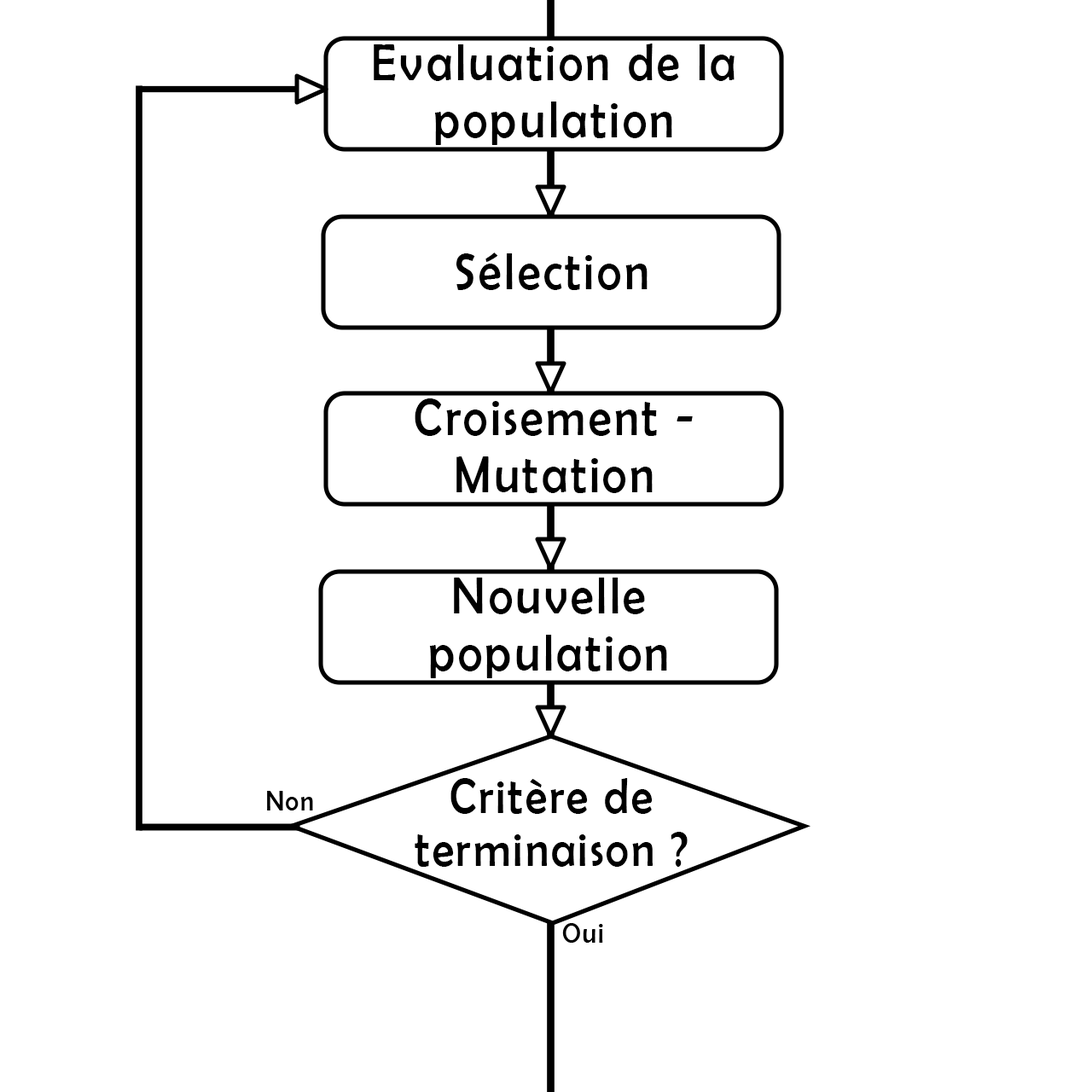
<style>
.page{position:relative;width:1092px;height:1092px;background:#ffffff}
.page>*{position:absolute;margin:0}
.t1{font:52.9px "BerlinSansFB-Reg";letter-spacing:0.06em;color:#000000;scale:0.89 1}
.t2{font:49.6px "BerlinSansFB-Reg";letter-spacing:0.06em;color:#000000;scale:0.89 1}
.t3{font:28.7px "BerlinSansFB-Reg";letter-spacing:0.06em;color:#000000;scale:0.89 1}
</style>
<div class="page">
<p class="t1" style="left:374px;top:44px;width:361px;height:101px;text-align:center">Evaluation de la <br>population</p>
<p class="t1" style="left:456px;top:253px;width:192px;height:37px">Sélection</p>
<p class="t1" style="left:415px;top:398px;width:278px;height:95px;text-align:center">Croisement - Mutation</p>
<p class="t1" style="left:429px;top:578px;width:238px;height:100px;text-align:center">Nouvelle population</p>
<p class="t2" style="left:415px;top:778px;width:273px;height:89px;text-align:center">Critère de terminaison ?</p>
<p class="t3" style="left:267px;top:791px;width:46px;height:19px">Non</p>
<p class="t3" style="left:562px;top:923px;width:41px;height:20px">Oui</p>
</div>
